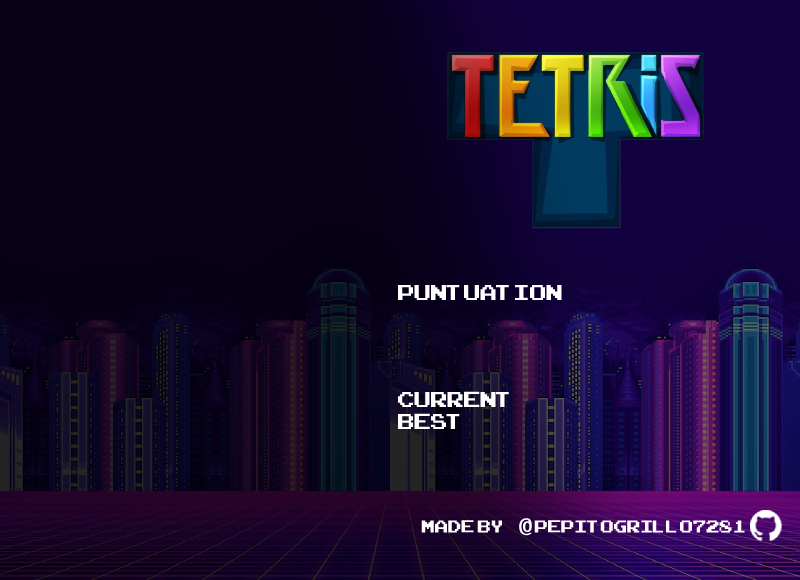
<style>
.page{position:relative;width:800px;height:580px}
.page>*{position:absolute;margin:0}
.t1{font:30px "ArcadeClassic";color:#ffffff}
.t2{font:24px "ArcadeClassic";color:#ffffff}
.t3{font:24px "CMUSansSerif-DemiCondensed";color:#ffffff}
</style>
<div class="page">
<p class="t1" style="left:398px;top:285px;width:164px;height:16px">Puntuation</p>
<p class="t2" style="left:421px;top:520px;width:324px;height:13px">Made by          pepitogrillo7281</p>
<p class="t3" style="left:519px;top:518px;width:13px;height:18px">@</p>
</div>
